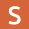
<style>
.page{position:relative;width:29px;height:29px;background:#d46439}
.page>*{position:absolute;margin:0}
.t1{font:26px "SukhumvitSet-SemiBold";color:#ffffff}
</style>
<div class="page">
<p class="t1" style="left:8px;top:6px;width:13px;height:19px">S</p>
</div>
